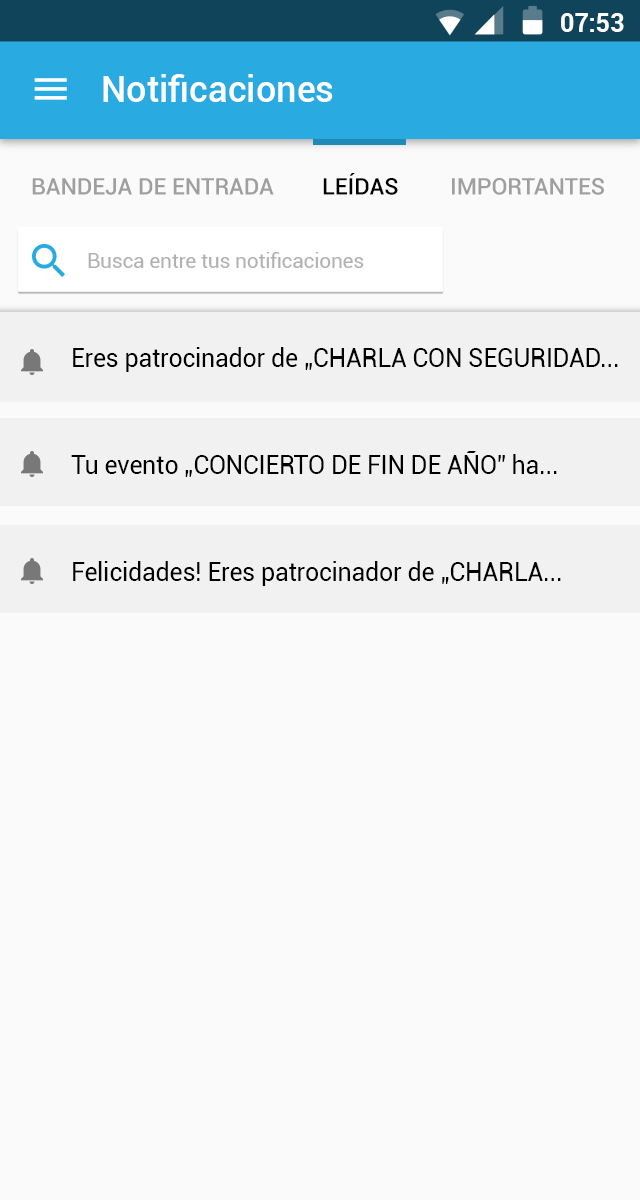
<style>
.page{position:relative;width:640px;height:1200px;background:#fafafa}
.page>*{position:absolute;margin:0}
.t1{font:24.9px "Roboto-Bold";color:#ffffff}
.t2{font:35.8px "Roboto-Medium";letter-spacing:0.005em;color:#ffffff}
.t3{font:22.9px "Roboto-Medium";color:#000000}
.t4{font:22.9px "Roboto-Medium";color:#9f9f9f}
.t5{font:20.8px "Roboto-Regular";letter-spacing:-0.01em;color:#b1b1b1}
.t6{font:25px "Roboto-Regular";letter-spacing:-0.01em;color:#000000}
</style>
<div class="page">
<p class="t1" style="left:561px;top:13px;width:63px;height:19px">07:53</p>
<p class="t2" style="left:103px;top:74px;width:230px;height:28px">Notificaciones</p>
<p class="t3" style="left:323px;top:173px;width:75px;height:22px">LEÍDAS</p>
<p class="t4" style="left:32px;top:178px;width:242px;height:17px">BANDEJA DE ENTRADA</p>
<p class="t4" style="left:452px;top:178px;width:152px;height:17px">IMPORTANTES</p>
<p class="t5" style="left:88px;top:252px;width:276px;height:16px">Busca entre tus notificaciones</p>
<p class="t6" style="left:73px;top:347px;width:545px;height:25px">Eres patrocinador de „CHARLA CON SEGURIDAD...</p>
<p class="t6" style="left:71px;top:451px;width:486px;height:26px">Tu evento „CONCIERTO DE FIN DE AÑO” ha...</p>
<p class="t6" style="left:73px;top:561px;width:488px;height:25px">Felicidades! Eres patrocinador de „CHARLA...</p>
</div>
